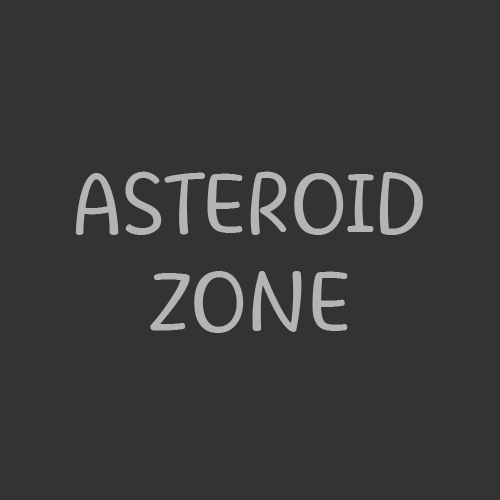
<style>
.page{position:relative;width:500px;height:500px;background:#333333}
.page>*{position:absolute;margin:0}
.t1{font:81.6px "BeatificMargella";color:#b4b4b4}
</style>
<div class="page">
<p class="t1" style="left:75px;top:171px;width:348px;height:162px;text-align:center">ASTEROID<br>ZONE</p>
</div>
